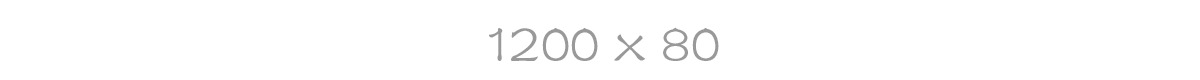
<style>
.page{position:relative;width:1200px;height:80px;background:#ffffff}
.page>*{position:absolute;margin:0}
.t1{font:60px "FZSTK--GBK1-0";color:#999999}
</style>
<div class="page">
<p class="t1" style="left:489px;top:27px;width:230px;height:34px">1200 x 80</p>
</div>
